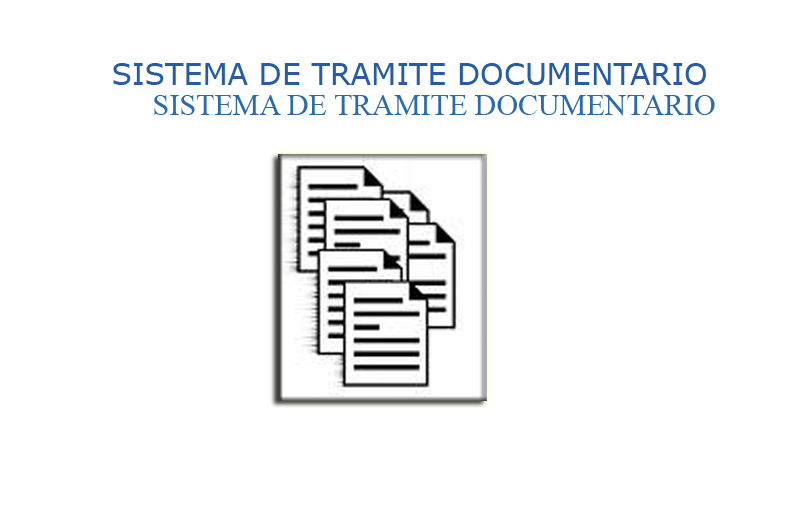
<style>
.page{position:relative;width:789px;height:531px;background:#ffffff}
.page>*{position:absolute;margin:0}
.t1{font:30px "TimesNewRomanPSMT";color:#2b6bab}
</style>
<div class="page">
<p class="t1" style="left:154px;top:95px;width:561px;height:21px">SISTEMA DE TRAMITE DOCUMENTARIO</p>
</div>
